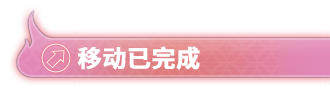
<style>
.page{position:relative;width:330px;height:90px;background:#ffffff}
.page>*{position:absolute;margin:0}
.t1{font:24px "SourceHanSansSC-Bold";color:#ffffff;font-weight:bold}
</style>
<div class="page">
<p class="t1" style="left:77px;top:46px;width:123px;height:24px">移动已完成</p>
</div>
